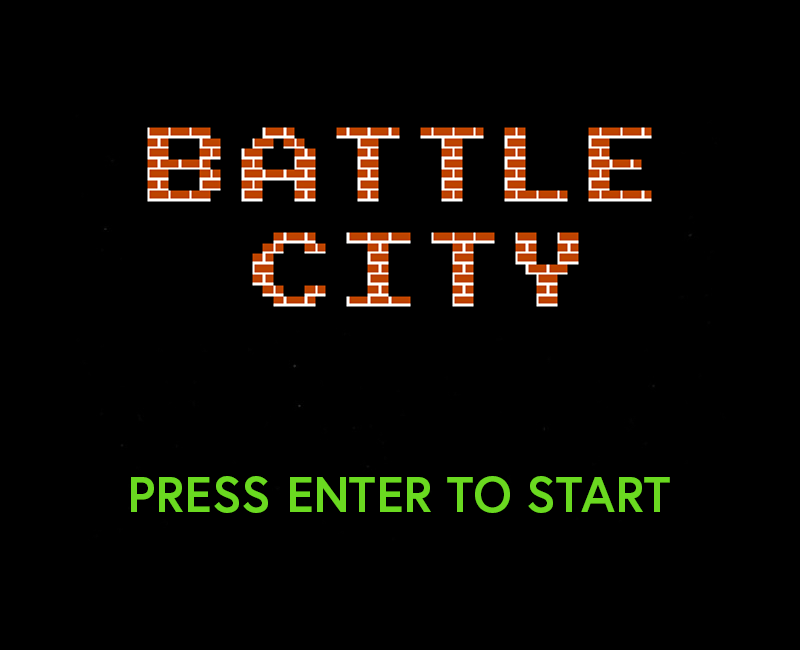
<style>
.page{position:relative;width:800px;height:650px;background:#000000}
.page>*{position:absolute;margin:0}
.t1{font:50px "Europa-Bold";color:#6ad920}
</style>
<div class="page">
<p class="t1" style="left:131px;top:476px;width:539px;height:37px">PRESS ENTER TO START</p>
</div>
